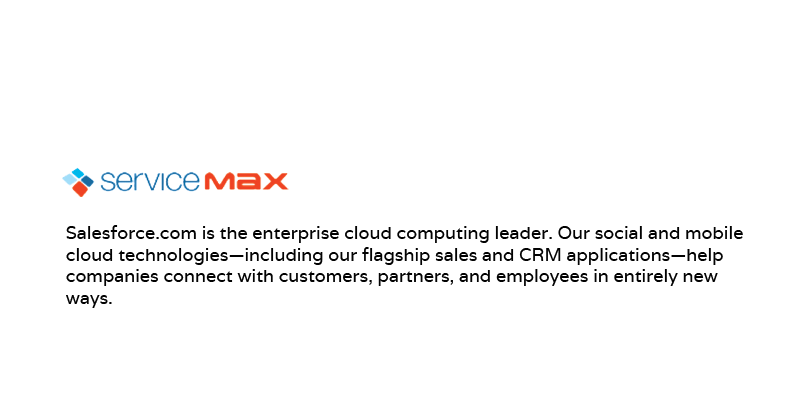
<style>
.page{position:relative;width:800px;height:400px;background:#ffffff}
.page>*{position:absolute;margin:0}
.t1{font:18px "Varela";color:#020202}
</style>
<div class="page">
<p class="t1" style="left:66px;top:225px;width:677px;height:83px">Salesforce.com is the enterprise cloud computing leader. Our social and mobile cloud technologies—including our flagship sales and CRM applications—help companies connect with customers, partners, and employees in entirely new ways.<br><br>And thanks to the cloud, all of it comes with low cost, low risk, and fast results. Our 100,000+ successful customers tell the story best.</p>
</div>
